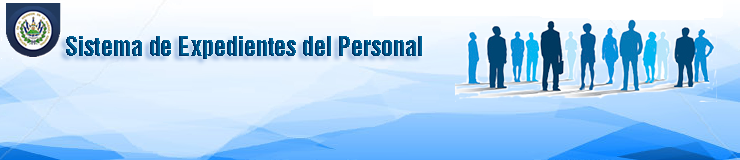
<style>
.page{position:relative;width:740px;height:160px}
.page>*{position:absolute;margin:0}
.t1{font:24px "HelveticaInseratLTStd-Roman"}
</style>
<div class="page">
<p class="t1" style="left:66px;top:36px;width:356px;height:23px">Sistema de Expedientes del Personal</p>
</div>
